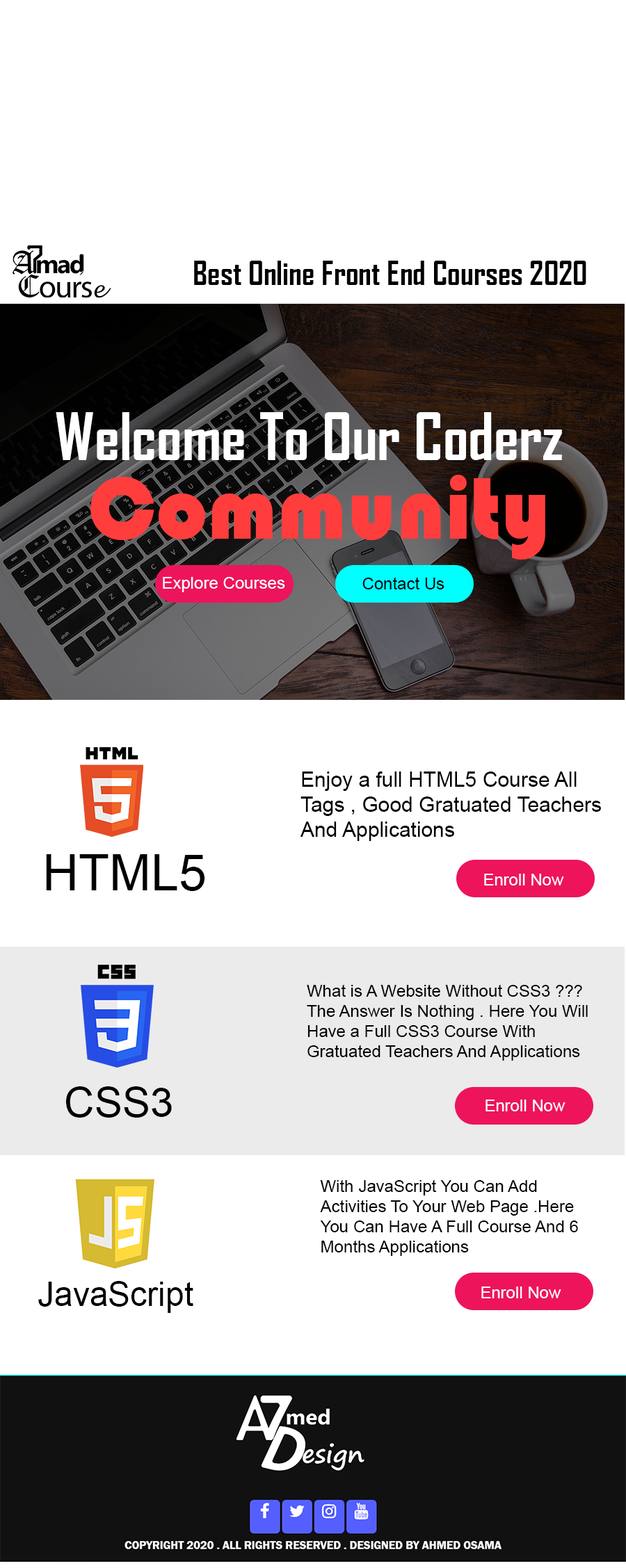
<style>
.page{position:relative;width:626px;height:1568px;background:#ffffff}
.page>*{position:absolute;margin:0}
.t1{font:32px "AgencyFB-Bold";color:#000000}
.t2{font:62.6px "AgencyFB-Bold";color:#ffffff}
.t3{font:90.4px "Bauhaus93";color:#ff3d3d}
.t4{font:16.7px "ArialMT";color:#fefefe}
.t5{font:16.7px "ArialMT";color:#010000}
.t6{font:20.9px "ArialMT";color:#000000}
.t7{font:50px "ArialMT";color:#000000}
.t8{font:16.7px "ArialMT";color:#000000}
.t9{font:41.7px "ArialMT";color:#000000}
.t10{font:33.4px "ArialMT";color:#000000}
</style>
<div class="page">
<p class="t1" style="left:194px;top:261px;width:392px;height:24px">Best Online Front End Courses 2020</p>
<p class="t2" style="left:56px;top:412px;width:506px;height:48px">Welcome To Our Coderz</p>
<p class="t3" style="left:90px;top:475px;width:455px;height:85px">Community</p>
<p class="t4" style="left:163px;top:577px;width:122px;height:15px">Explore Courses</p>
<p class="t5" style="left:362px;top:577px;width:82px;height:12px">Contact Us</p>
<p class="t6" style="left:300px;top:771px;width:301px;height:70px">Enjoy a full HTML5 Course All Tags , Good Gratuated Teachers And Applications</p>
<p class="t7" style="left:46px;top:854px;width:159px;height:37px">HTML5</p>
<p class="t4" style="left:484px;top:874px;width:80px;height:11px">Enroll Now</p>
<p class="t8" style="left:307px;top:984px;width:280px;height:77px">What is A Website Without CSS3 ???<br>The Answer Is Nothing . Here You Will Have a Full CSS3 Course With Gratuated Teachers And Applications</p>
<p class="t9" style="left:66px;top:1086px;width:106px;height:32px">CSS3</p>
<p class="t4" style="left:485px;top:1100px;width:80px;height:11px">Enroll Now</p>
<p class="t8" style="left:320px;top:1179px;width:258px;height:77px">With JavaScript You Can Add Activities To Your Web Page .Here You Can Have A Full Course And 6 Months Applications</p>
<p class="t10" style="left:38px;top:1281px;width:155px;height:32px">JavaScript</p>
<p class="t4" style="left:481px;top:1287px;width:80px;height:11px">Enroll Now</p>
</div>
